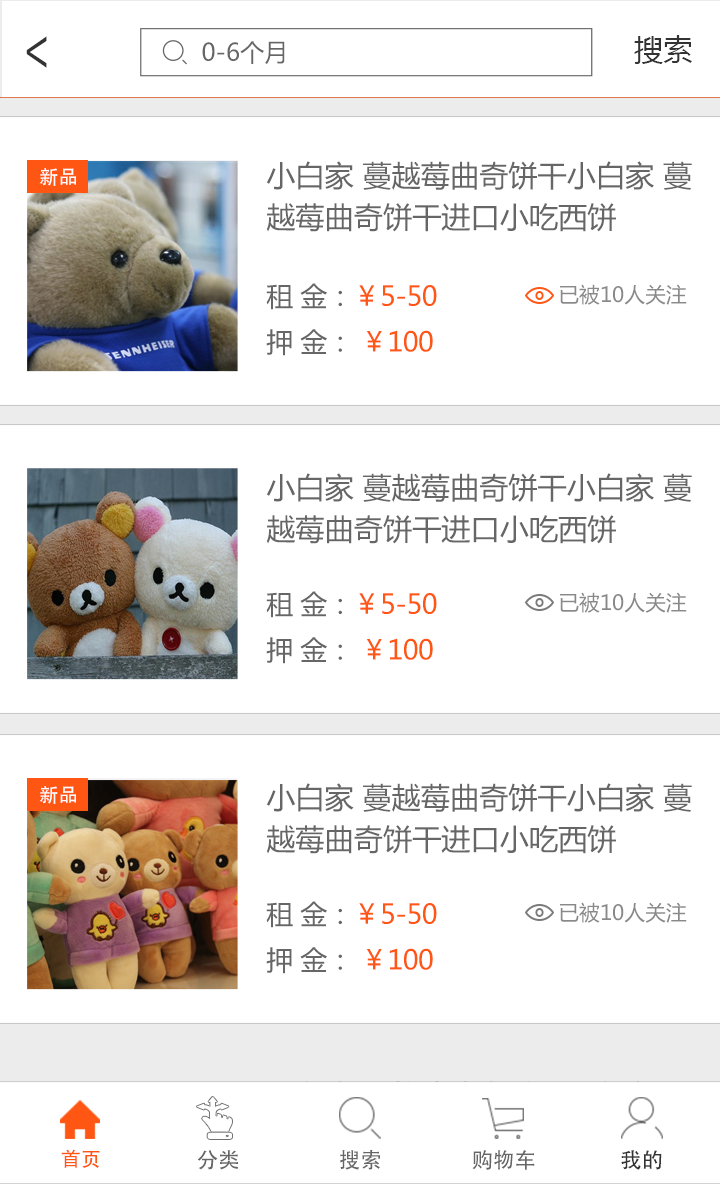
<style>
.page{position:relative;width:720px;height:1184px;background:#ffffff}
.page>*{position:absolute;margin:0}
.t1{font:51.9px "AdobeHeitiStd-Regular";color:#333333;scale:0.72 1}
.t2{font:24.1px "MicrosoftYaHei";color:#666666}
.t3{font:29.2px "MicrosoftYaHei";color:#333333}
.t4{font:29.2px/41.7px "MicrosoftYaHei";color:#666666}
.t5{font:19.4px "AdobeHeitiStd-Regular";color:#ffffff}
.t6{font:27.1px/45.8px "MicrosoftYaHei";letter-spacing:-0.02em;color:#ff5614}
.t7{font:27.1px/45.8px "MicrosoftYaHei";letter-spacing:-0.02em;color:#666666}
.t8{font:20.8px "MicrosoftYaHei";color:#898989}
.t9{font:20px "AdobeHeitiStd-Regular";color:#ff5614}
.t10{font:21.4px "AdobeHeitiStd-Regular";color:#666666}
.t11{font:21.4px "AdobeHeitiStd-Regular";color:#333333}
</style>
<div class="page">
<p class="t1" style="left:26px;top:36px;width:21px;height:32px;rotate:180deg">&gt;</p>
<p class="t2" style="left:202px;top:41px;width:83px;height:23px">0-6个月</p>
<p class="t3" style="left:634px;top:35px;width:58px;height:29px">搜索</p>
<p class="t4" style="left:266px;top:161px;width:426px;height:71px;text-align:justify">小白家 蔓越莓曲奇饼干小白家 蔓<br>越莓曲奇饼干进口小吃西饼</p>
<p class="t5" style="left:39px;top:168px;width:37px;height:18px">新品</p>
<p class="t6" style="left:266px;top:283px;width:171px;height:73px;text-align:justify"><span class="t7">租 金：</span>￥5-50<br><span class="t7">押 金：</span> ￥100</p>
<p class="t8" style="left:560px;top:284px;width:127px;height:21px">已被10人关注</p>
<p class="t4" style="left:266px;top:473px;width:426px;height:71px;text-align:justify">小白家 蔓越莓曲奇饼干小白家 蔓<br>越莓曲奇饼干进口小吃西饼</p>
<p class="t6" style="left:266px;top:591px;width:171px;height:73px;text-align:justify"><span class="t7">租 金：</span>￥5-50<br><span class="t7">押 金：</span> ￥100</p>
<p class="t8" style="left:560px;top:592px;width:127px;height:21px">已被10人关注</p>
<p class="t4" style="left:266px;top:783px;width:426px;height:71px;text-align:justify">小白家 蔓越莓曲奇饼干小白家 蔓<br>越莓曲奇饼干进口小吃西饼</p>
<p class="t5" style="left:39px;top:786px;width:37px;height:18px">新品</p>
<p class="t6" style="left:266px;top:901px;width:171px;height:73px;text-align:justify"><span class="t7">租 金：</span>￥5-50<br><span class="t7">押 金：</span> ￥100</p>
<p class="t8" style="left:560px;top:902px;width:127px;height:21px">已被10人关注</p>
<p class="t9" style="left:61px;top:1149px;width:39px;height:19px">首页</p>
<p class="t10" style="left:197px;top:1150px;width:42px;height:20px">分类</p>
<p class="t10" style="left:340px;top:1149px;width:40px;height:21px">搜索</p>
<p class="t10" style="left:472px;top:1150px;width:63px;height:20px">购物车</p>
<p class="t11" style="left:621px;top:1150px;width:41px;height:20px">我的</p>
</div>
